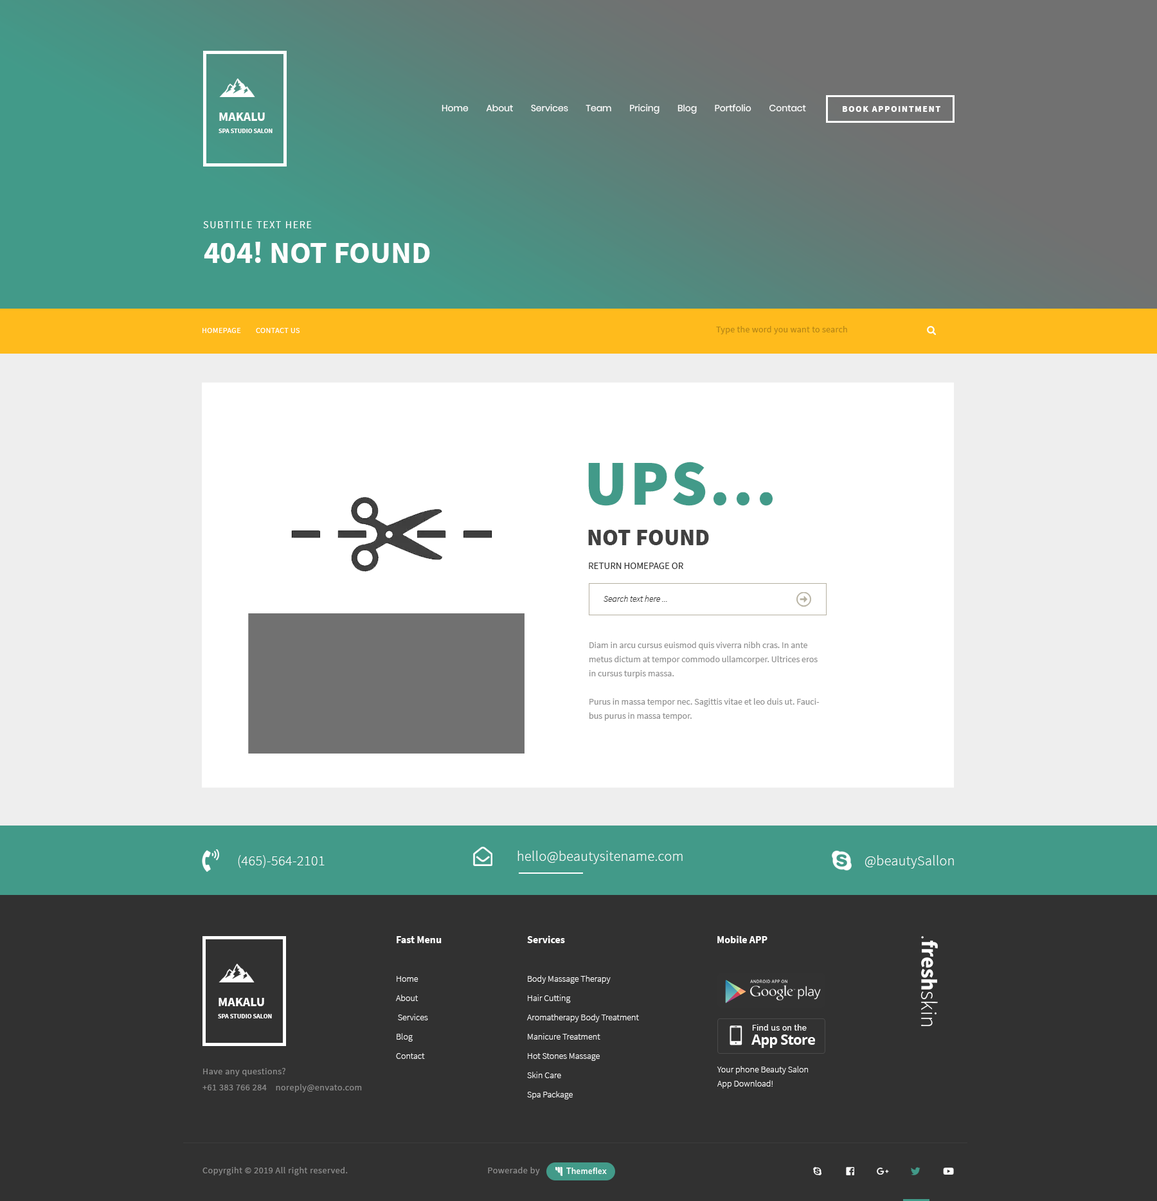
<style>
.page{position:relative;width:1157px;height:1201px;background:#313131}
.page>*{position:absolute;margin:0}
.t1{font:12.9px "SourceSansPro-Bold";color:#ffffff;text-transform:uppercase}
.t2{font:9px "Poppins-Regular";color:#ffffff}
.t3{font:9px "SourceSansPro-Black";letter-spacing:0.1em;color:#ffffff}
.t4{font:6.4px "SourceSansPro-Bold";color:#ffffff;text-transform:uppercase}
.t5{font:10.3px "SourceSansPro-Regular";letter-spacing:0.1em;color:#ffffff}
.t6{font:30.9px "SourceSansPro-Bold";color:#ffffff}
.t7{font:7.7px "SourceSansPro-Regular";letter-spacing:0.04em;color:#ffffff}
.t8{font:9px "SourceSansPro-Regular";letter-spacing:0.02em;color:#b68616}
.t9{font:64.3px "SourceSansPro-Black";letter-spacing:0.04em;color:#429a89}
.t10{font:23.1px "SourceSansPro-Black";color:#404040}
.t11{font:9.6px "SourceSansPro-Regular";color:#333333}
.t12{font:9px "SourceSansPro-LightItalic";color:#333333}
.t13{font:9px/14.1px "SourceSansPro-Regular";color:#909090}
.t14{font:14.1px "SourceSansPro-Light";letter-spacing:0.02em;color:#ffffff}
.t15{font:9px/19.3px "SourceSansPro-Light";color:#ffffff}
.t16{font:10.3px/19.3px "SourceSansPro-Bold";color:#ffffff}
.t17{font:10.3px "SourceSansPro-Bold";color:#ffffff}
.t18{font:22.5px "SourceSansPro-Bold";color:#ffffff}
.t19{font:22.5px "SourceSansPro-Light";color:#ffffff}
.t20{font:9px/16.1px "SourceSansPro-Regular";letter-spacing:0.04em;color:#8c8c8c}
.t21{font:9px/14.1px "SourceSansPro-Light";color:#ffffff}
.t22{font:9px "SourceSansPro-Regular";letter-spacing:0.04em;color:#8c8c8c}
</style>
<div class="page">
<p class="t1" style="left:219px;top:113px;width:46px;height:8px">MAKALU</p>
<p class="t2" style="left:442px;top:104px;width:364px;height:10px">Home        About        Services        Team        Pricing        Blog        Portfolio        Contact</p>
<p class="t3" style="left:843px;top:106px;width:98px;height:6px">BOOK APPOINTMENT</p>
<p class="t4" style="left:219px;top:129px;width:54px;height:4px">spa studıo salon</p>
<p class="t5" style="left:203px;top:221px;width:109px;height:7px">SUBTITLE TEXT HERE</p>
<p class="t6" style="left:204px;top:242px;width:226px;height:21px">404! NOT FOUND</p>
<p class="t7" style="left:203px;top:328px;width:97px;height:5px">HOMEPAGE        CONTACT US</p>
<p class="t8" style="left:716px;top:326px;width:131px;height:8px">Type the word you want to search</p>
<p class="t9" style="left:588px;top:462px;width:185px;height:44px">UPS...</p>
<p class="t10" style="left:588px;top:530px;width:121px;height:15px">NOT FOUND</p>
<p class="t11" style="left:589px;top:562px;width:94px;height:7px">RETURN HOMEPAGE OR</p>
<p class="t12" style="left:604px;top:595px;width:63px;height:7px">Search text here ...</p>
<p class="t13" style="left:589px;top:642px;width:231px;height:79px">Diam in arcu cursus euismod quis viverra nibh cras. In ante metus dictum at tempor commodo ullamcorper. Ultrices eros in cursus turpis massa.<br><br>Purus in massa tempor nec. Sagittis vitae et leo duis ut. Faucibus purus in massa tempor.</p>
<p class="t14" style="left:238px;top:855px;width:87px;height:13px">(465)-564-2101</p>
<p class="t14" style="left:518px;top:851px;width:165px;height:13px">hello@beautysitename.com</p>
<p class="t14" style="left:865px;top:855px;width:89px;height:14px">@beautySallon</p>
<p class="t15" style="left:396px;top:936px;width:46px;height:123px"><span class="t16">Fast Menu<br><br></span>Home<br>About<br> Services<br>Blog<br>Contact</p>
<p class="t15" style="left:527px;top:935px;width:112px;height:164px"><span class="t16">Services<br><br></span>Body Massage Therapy<br>Hair Cutting<br>Aromatherapy Body Treatment<br>Manicure Treatment<br>Hot Stones Massage<br>Skin Care<br>Spa Package</p>
<p class="t17" style="left:717px;top:935px;width:51px;height:8px">Mobile APP</p>
<p class="t18" style="left:921px;top:936px;width:17px;height:90px;rotate:90deg"><span class="t19">.</span>fresh<span class="t19">skin</span></p>
<p class="t1" style="left:219px;top:998px;width:45px;height:8px">MAKALU</p>
<p class="t4" style="left:218px;top:1014px;width:54px;height:4px">spa studıo salon</p>
<p class="t20" style="left:203px;top:1068px;width:159px;height:24px">Have any questions? <br>+61 383 766 284    noreply@envato.com</p>
<p class="t21" style="left:717px;top:1066px;width:91px;height:22px">Your phone Beauty Salon<br>App Download!</p>
<p class="t22" style="left:203px;top:1167px;width:145px;height:8px">Copyrgiht © 2019 All right reserved.</p>
<p class="t22" style="left:488px;top:1167px;width:52px;height:8px">Powerade by</p>
</div>
